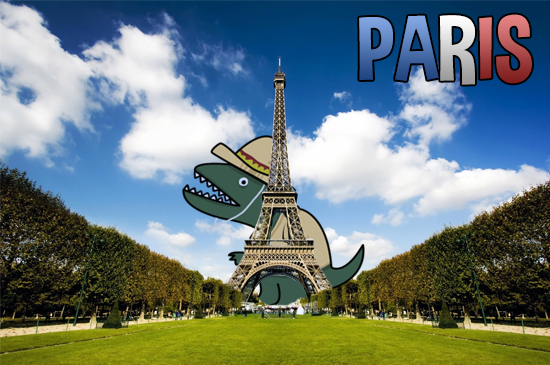
<style>
.page{position:relative;width:550px;height:365px}
.page>*{position:absolute;margin:0}
.t1{font:90px "DimboRegular"}
</style>
<div class="page">
<p class="t1" style="left:359px;top:14px;width:173px;height:71px">PARIS</p>
</div>
